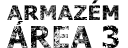
<style>
.page{position:relative;width:128px;height:48px;background:#ffffff}
.page>*{position:absolute;margin:0}
.t1{font:20px "Verdana-Bold";letter-spacing:-0.01em;font-weight:bold}
.t2{font:29.5px "Verdana-Bold";letter-spacing:-0.06em;font-weight:bold}
</style>
<div class="page">
<p class="t1" style="left:7px;top:0px;width:112px;height:20px">ARMAZÉM</p>
<p class="t2" style="left:7px;top:25px;width:112px;height:24px">AREA 3</p>
</div>
